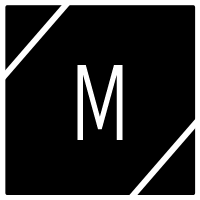
<style>
.page{position:relative;width:200px;height:200px;background:#000000}
.page>*{position:absolute;margin:0}
.t1{font:106.6px "RefrigeratorLight";color:#ffffff}
</style>
<div class="page">
<p class="t1" style="left:77px;top:65px;width:46px;height:75px">M</p>
<p class="t1" style="left:77px;top:65px;width:46px;height:75px">M</p>
</div>
